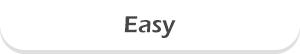
<style>
.page{position:relative;width:300px;height:54px;background:#ffffff}
.page>*{position:absolute;margin:0}
.t1{font:24px "ErasITC-Demi";color:#464646}
</style>
<div class="page">
<p class="t1" style="left:124px;top:16px;width:52px;height:22px">Easy</p>
</div>
